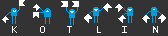
<style>
.page{position:relative;width:168px;height:36px;background:#333333}
.page>*{position:absolute;margin:0}
.t1{font:10px "LucidaConsole";color:#ffffff}
</style>
<div class="page">
<p class="t1" style="left:12px;top:26px;width:5px;height:7px">K</p>
<p class="t1" style="left:40px;top:26px;width:5px;height:7px">O</p>
<p class="t1" style="left:67px;top:26px;width:5px;height:7px">T</p>
<p class="t1" style="left:97px;top:26px;width:4px;height:7px">L</p>
<p class="t1" style="left:122px;top:26px;width:5px;height:7px">I</p>
<p class="t1" style="left:153px;top:26px;width:5px;height:7px">N</p>
</div>
